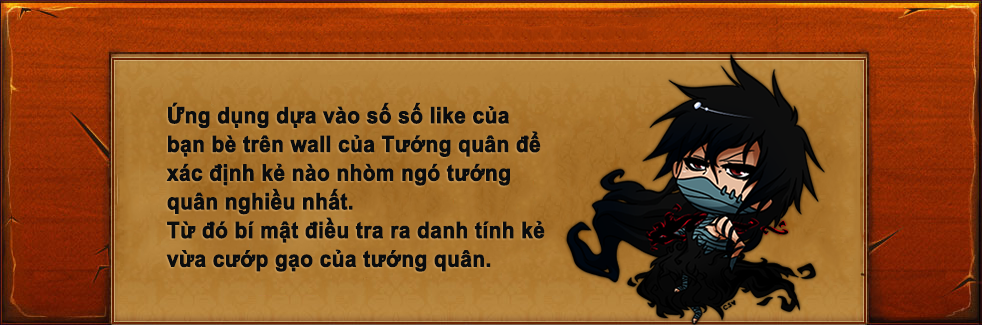
<style>
.page{position:relative;width:982px;height:325px}
.page>*{position:absolute;margin:0}
.t1{font:22.4px/28.7px "Arial-BoldMT";color:#0a0c0e;font-weight:bold;scale:0.92 1}
</style>
<div class="page">
<p class="t1" style="left:166px;top:102px;width:379px;height:170px">Ứng dụng dựa vào số số like của bạn bè trên wall của Tướng quân để xác định kẻ nào nhòm ngó tướng quân nghiều nhất.<br>Từ đó bí mật điều tra ra danh tính kẻ vừa cướp gạo của tướng quân.</p>
</div>
